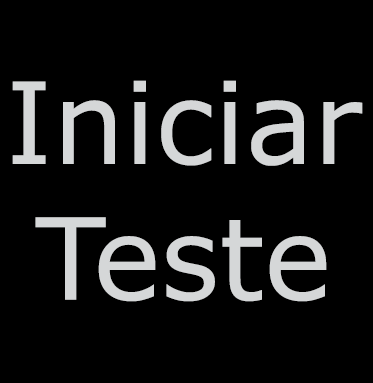
<style>
.page{position:relative;width:373px;height:383px;background:#000000}
.page>*{position:absolute;margin:0}
.t1{font:113.1px "Verdana";color:#d5d7d8}
</style>
<div class="page">
<p class="t1" style="left:12px;top:80px;width:351px;height:222px;text-align:center">Iniciar<br>Teste</p>
</div>
